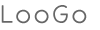
<style>
.page{position:relative;width:100px;height:30px;background:#ffffff}
.page>*{position:absolute;margin:0}
.t1{font:25px "HappyMonkey-Regular";letter-spacing:0.1em;color:#666666}
</style>
<div class="page">
<p class="t1" style="left:1px;top:5px;width:86px;height:19px">LooGo</p>
</div>
